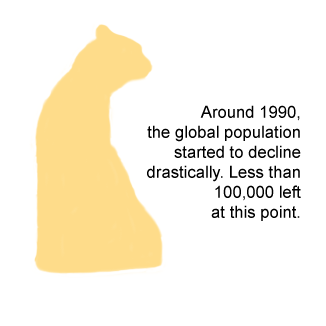
<style>
.page{position:relative;width:326px;height:326px;background:#ffffff}
.page>*{position:absolute;margin:0}
.t1{font:16.7px "ArialMT";color:#000000}
</style>
<div class="page">
<p class="t1" style="left:147px;top:105px;width:154px;height:116px;text-align:right">Around 1990,<br>the global population<br>started to decline<br>drastically. Less than<br>100,000 left<br>at this point.</p>
</div>
